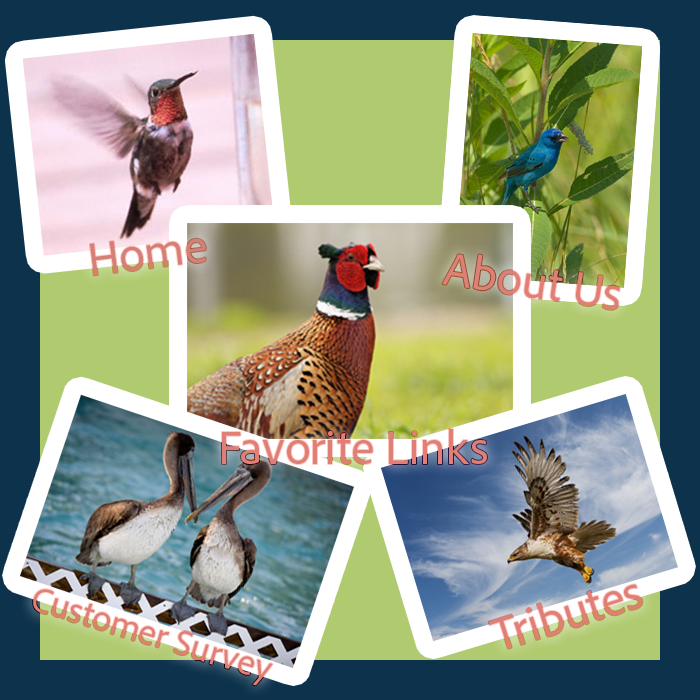
<style>
.page{position:relative;width:700px;height:700px}
.page>*{position:absolute;margin:0}
.t1{font:48px "AdobeClean-Regular";color:#d57f76}
.t2{font:48px "AdobeClean-Regular";color:#df7f76}
</style>
<div class="page">
<p class="t1" style="left:90px;top:238px;width:116px;height:38px;rotate:-7deg">Home</p>
<p class="t2" style="left:442px;top:254px;width:178px;height:56px;rotate:9deg">About Us</p>
<p class="t2" style="left:222px;top:429px;width:265px;height:35px">Favorite Links</p>
<p class="t2" style="left:488px;top:584px;width:155px;height:65px;rotate:-18deg">Tributes</p>
</div>
